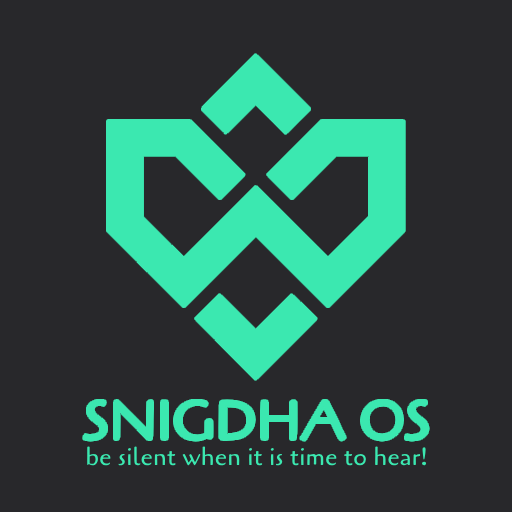
<style>
.page{position:relative;width:512px;height:512px;background:#28282b}
.page>*{position:absolute;margin:0}
.t1{font:54px "Cagliostro-Regular";color:#3be8b0}
.t2{font:25px "Cagliostro-Regular";color:#3be8b0}
</style>
<div class="page">
<p class="t1" style="left:84px;top:400px;width:344px;height:40px">SNIGDHA OS</p>
<p class="t2" style="left:87px;top:446px;width:340px;height:21px">be silent when it is time to hear!</p>
</div>
